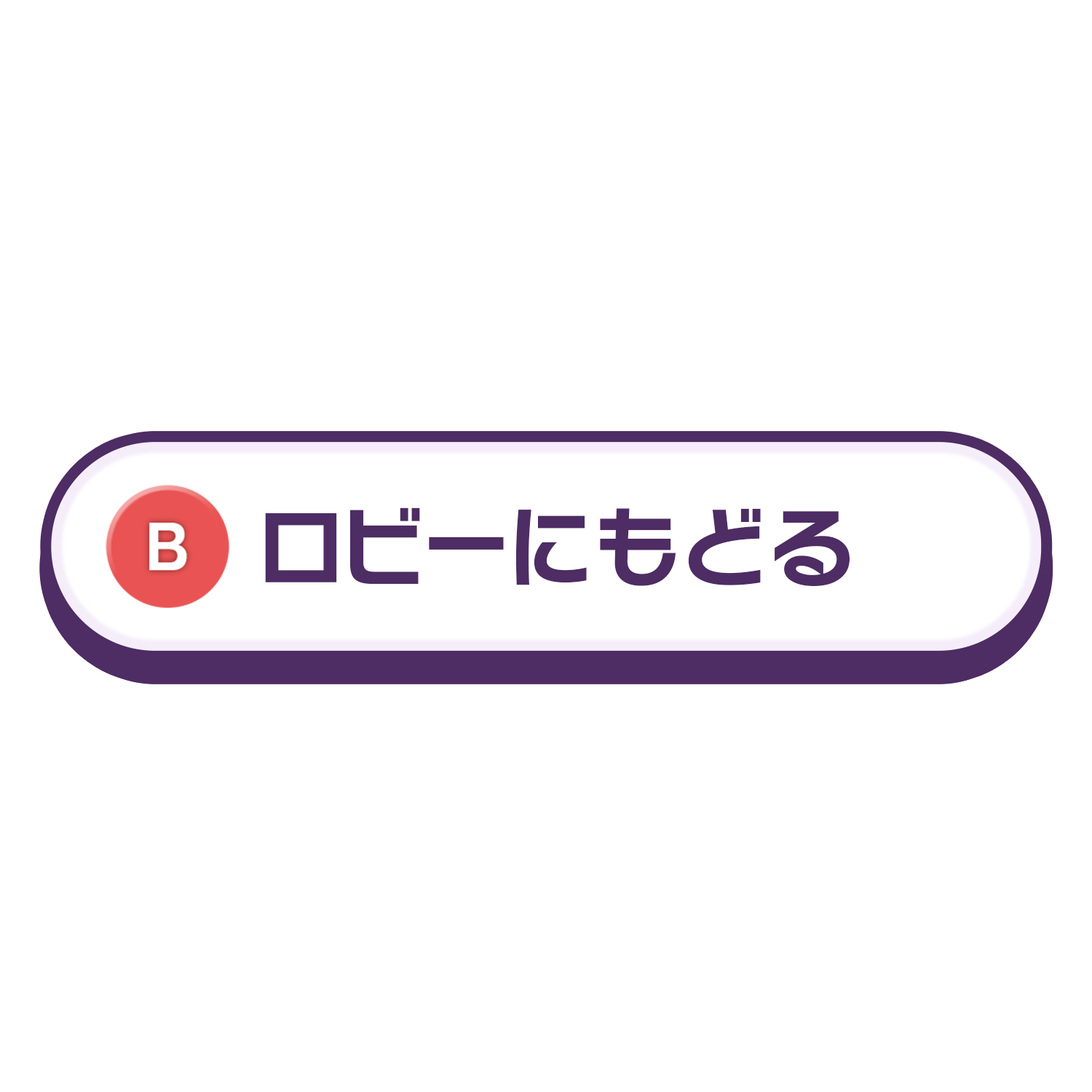
<style>
.page{position:relative;width:1092px;height:1092px;background:#ffffff}
.page>*{position:absolute;margin:0}
.t1{font:90.9px "NitalagoRuika-06";color:#4e2c64}
</style>
<div class="page">
<p class="t1" style="left:265px;top:507px;width:585px;height:79px">ロビーにもどる</p>
</div>
